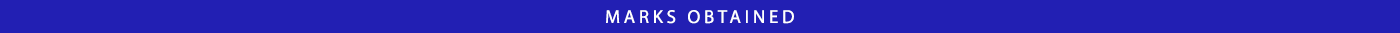
<style>
.page{position:relative;width:1400px;height:33px;background:#221fb3}
.page>*{position:absolute;margin:0}
.t1{font:18.8px "MyriadPro-Regular";letter-spacing:0.2em;color:#ffffff}
</style>
<div class="page">
<p class="t1" style="left:606px;top:10px;width:188px;height:14px">MARKS OBTAINED</p>
</div>
